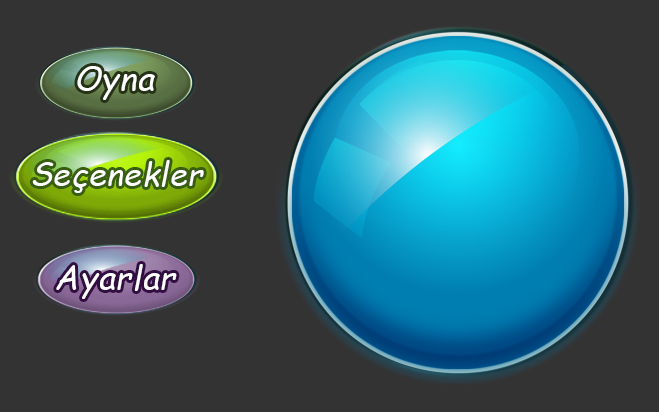
<style>
.page{position:relative;width:659px;height:412px;background:#333333}
.page>*{position:absolute;margin:0}
.t1{font:33.3px "ComicSansMS";letter-spacing:0.02em;color:#ffffff;font-style:italic}
.t2{font:32px "ComicSansMS";letter-spacing:0.02em;color:#ffffff;font-style:italic}
</style>
<div class="page">
<p class="t1" style="left:77px;top:66px;width:78px;height:34px">Oyna</p>
<p class="t2" style="left:32px;top:160px;width:172px;height:33px">Seçenekler</p>
<p class="t1" style="left:56px;top:264px;width:121px;height:35px">Ayarlar</p>
</div>
